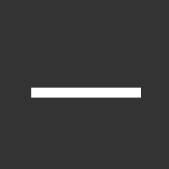
<style>
.page{position:relative;width:169px;height:169px;background:#333333}
.page>*{position:absolute;margin:0}
.t1{font:150px "KozGoPr6N-Regular";color:#ffffff;text-transform:uppercase}
</style>
<div class="page">
<p class="t1" style="left:31px;top:87px;width:110px;height:11px">−</p>
</div>
